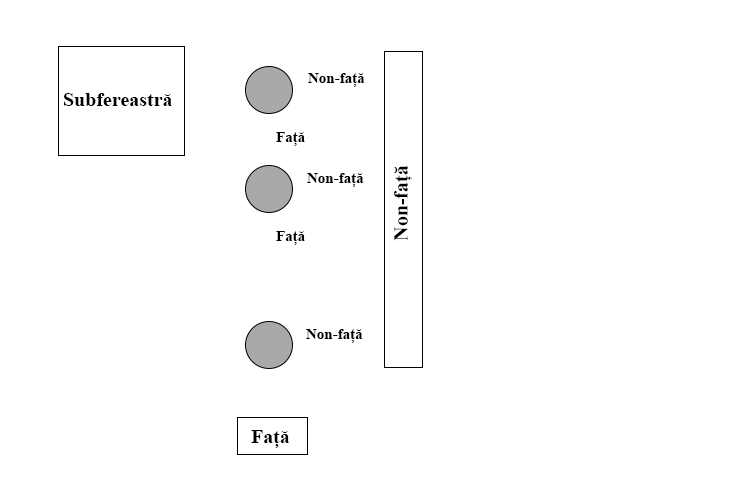
<style>
.page{position:relative;width:746px;height:500px;background:#ffffff}
.page>*{position:absolute;margin:0}
.t1{font:15px "TimesNewRomanPS-BoldMT";color:#000000}
.t2{font:20px "TimesNewRomanPS-BoldMT";color:#000000}
</style>
<div class="page">
<p class="t1" style="left:308px;top:73px;width:57px;height:14px">Non-față</p>
<p class="t2" style="left:64px;top:93px;width:108px;height:13px">Subfereastră</p>
<p class="t1" style="left:276px;top:132px;width:29px;height:14px">Față</p>
<p class="t1" style="left:307px;top:173px;width:57px;height:14px">Non-față</p>
<p class="t2" style="left:394px;top:165px;width:19px;height:76px;rotate:-90deg">Non-față</p>
<p class="t1" style="left:276px;top:231px;width:29px;height:14px">Față</p>
<p class="t1" style="left:306px;top:329px;width:57px;height:14px">Non-față</p>
<p class="t2" style="left:251px;top:430px;width:39px;height:18px">Față</p>
</div>
